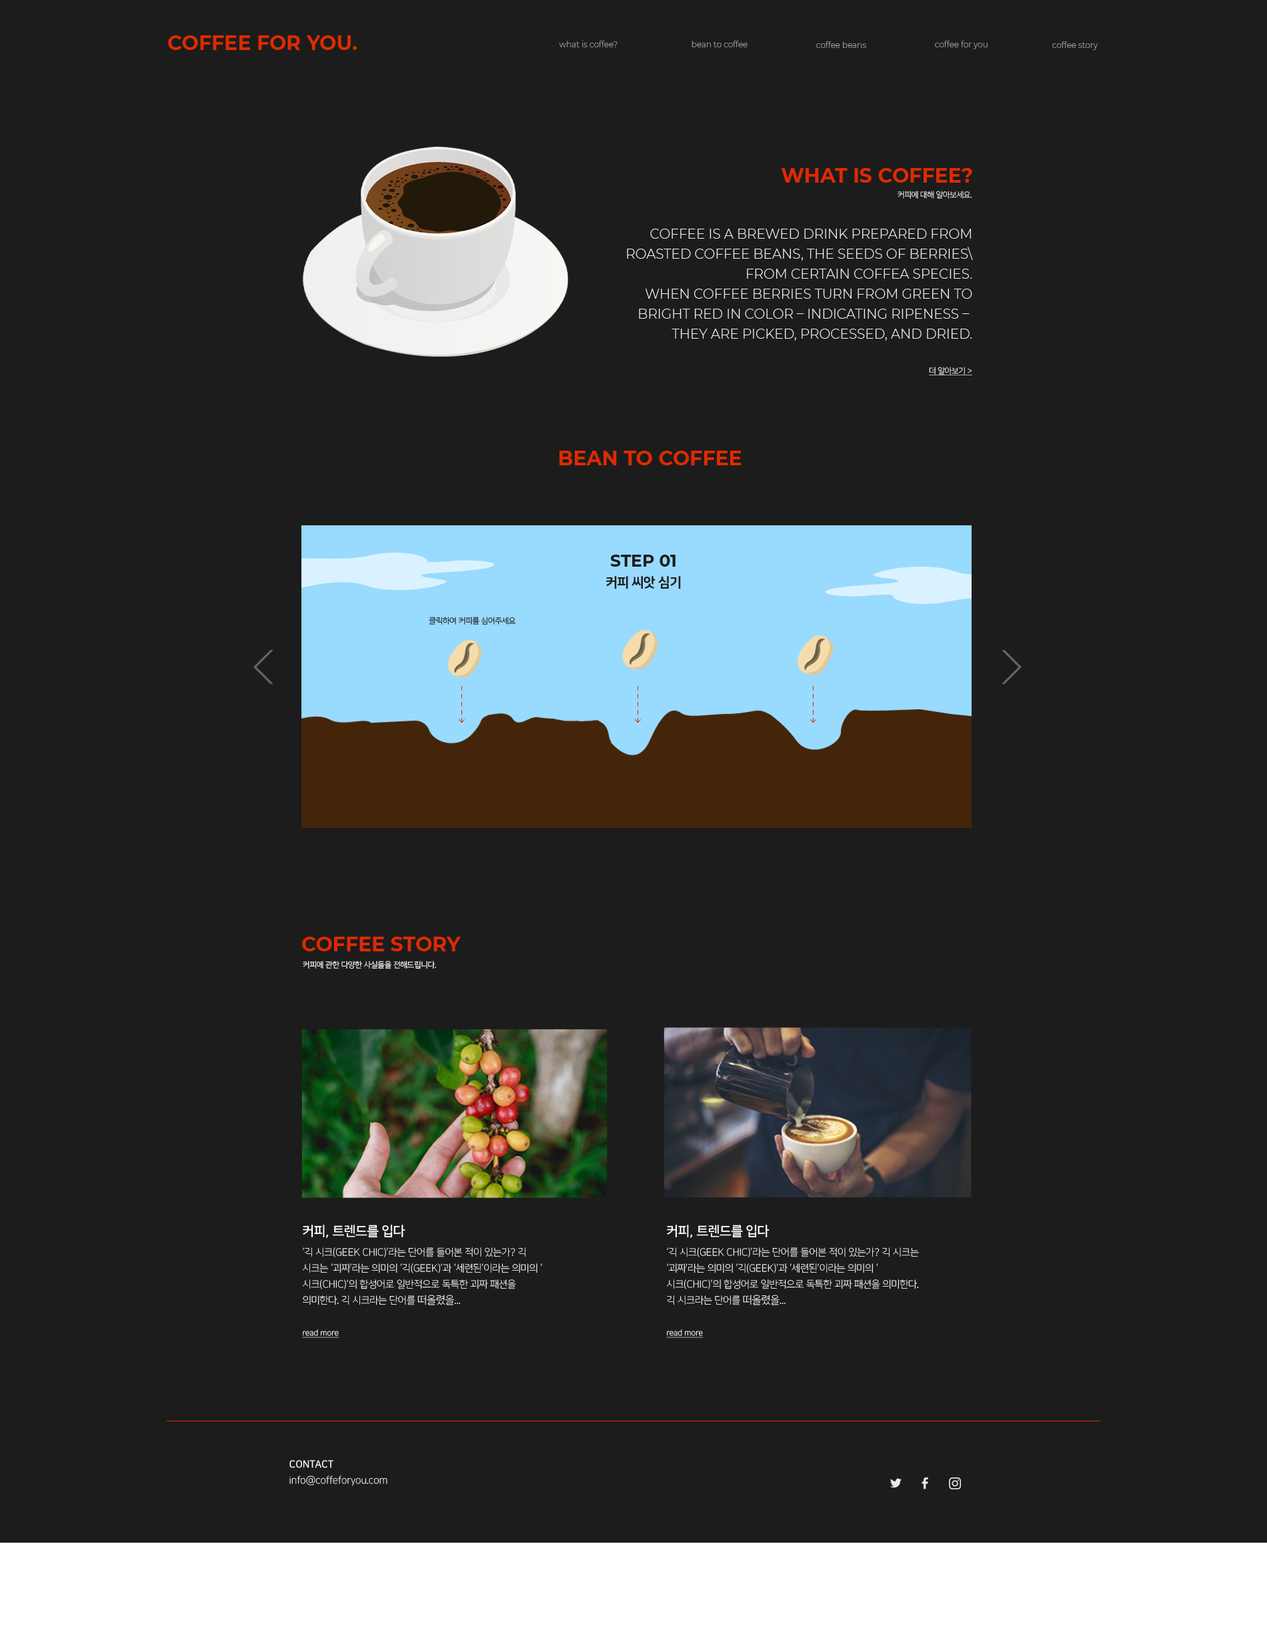
<style>
.page{position:relative;width:1267px;height:1640px;background:#1c1c1c}
.page>*{position:absolute;margin:0}
.t1{font:20px "Montserrat-Bold";color:#de2a00;text-transform:uppercase}
.t2{font:8px "Montserrat-Light";color:#b2b2b2}
.t3{font:8px "NanumSquare_acL";color:#f2f2f2;text-transform:uppercase}
.t4{font:13.3px/20px "Montserrat-Light";color:#f2f2f2;text-transform:uppercase}
.t5{font:8px "NanumSquare_acL";color:#f2f2f2;text-transform:uppercase;text-decoration:underline}
.t6{font:13.3px/20px "NanumSquare_acEB";color:#1c1c1c;text-transform:uppercase}
.t7{font:16.7px/20px "Montserrat-Bold";color:#1c1c1c;text-transform:uppercase}
.t8{font:8px "NanumSquare_acL";color:#1c1c1c;text-transform:uppercase}
.t9{font:8px "NanumSquare_acR";color:#f2f2f2;text-transform:uppercase}
.t10{font:10px/16px "NanumSquare_acL";color:#ffffff;text-transform:uppercase}
.t11{font:13.3px/32px "NanumSquare_acB";color:#ffffff;text-transform:uppercase}
.t12{font:13.3px/40px "NanumSquare_acB";color:#ffffff;text-transform:uppercase}
.t13{font:13.3px/20px "NanumSquare_acB";color:#ffffff;text-transform:uppercase}
.t14{font:10px/20px "NanumSquare_acL";color:#ffffff;text-transform:uppercase}
.t15{font:10.7px/16px "NanumSquare_acL";color:#ffffff;text-transform:uppercase}
.t16{font:8px/16px "NanumSquare_acL";color:#ffffff;text-decoration:underline}
.t17{font:10px/16px "NanumSquare_acL";color:#ffffff}
.t18{font:10px/16px "NanumSquare_acB";color:#ffffff;text-transform:uppercase}
</style>
<div class="page">
<p class="t1" style="left:168px;top:35px;width:189px;height:15px">Coffee for you.</p>
<p class="t2" style="left:559px;top:41px;width:58px;height:6px">what is coffee?</p>
<p class="t2" style="left:691px;top:41px;width:56px;height:6px">bean to coffee</p>
<p class="t2" style="left:816px;top:41px;width:50px;height:7px">coffee beans</p>
<p class="t2" style="left:935px;top:41px;width:52px;height:8px">coffee for you</p>
<p class="t2" style="left:1052px;top:41px;width:46px;height:9px">coffee story</p>
<p class="t1" style="left:781px;top:168px;width:191px;height:15px">what is coffee?</p>
<p class="t3" style="left:897px;top:191px;width:75px;height:8px">커피에 대해 알아보세요.</p>
<p class="t4" style="left:627px;top:229px;width:346px;height:112px;text-align:right">Coffee is a brewed drink prepared from<br>roasted coffee beans, the seeds of berries\<br>from certain Coffea species.<br>When coffee berries turn from green to<br>bright red in color – indicating ripeness – <br>they are picked, processed, and dried.</p>
<p class="t5" style="left:929px;top:367px;width:43px;height:8px">더 알아보기 &gt;</p>
<p class="t1" style="left:559px;top:451px;width:182px;height:14px">bean to coffee</p>
<p class="t6" style="left:606px;top:555px;width:75px;height:34px;text-align:center"><span class="t7">step 01<br></span>커피 씨앗 심기</p>
<p class="t8" style="left:429px;top:617px;width:87px;height:8px">클릭하여 커피를 심어주세요</p>
<p class="t1" style="left:302px;top:937px;width:159px;height:14px">coffee story</p>
<p class="t9" style="left:303px;top:961px;width:133px;height:8px">커피에 관한 다양한 사실들을 전해드립니다.</p>
<p class="t10" style="left:302px;top:1225px;width:240px;height:113px"><span class="t11">커피, 트렌드</span><span class="t12">를</span><span class="t13"> 입다<br></span><span class="t14">‘긱 시크(Geek Chic</span>)’라는 단어를 들어본 적이 있는가? 긱 시크는 ‘괴짜’라는 의미의 ‘긱(Geek)’과 ‘세련된’이라는 의미의 ‘시크(Chic)’의 합성어로 일반적으로 독특한 괴짜 패션을 의미한다. 긱 시크라는 단어를 <span class="t15">떠올렸을...<br><br></span><span class="t16">read more</span></p>
<p class="t10" style="left:666px;top:1225px;width:253px;height:113px"><span class="t11">커피, 트렌드</span><span class="t12">를</span><span class="t13"> 입다<br></span><span class="t14">‘긱 시크(Geek Chic</span>)’라는 단어를 들어본 적이 있는가? 긱 시크는 ‘괴짜’라는 의미의 ‘긱(Geek)’과 ‘세련된’이라는 의미의 ‘시크(Chic)’의 합성어로 일반적으로 독특한 괴짜 패션을 의미한다. 긱 시크라는 단어를 <span class="t15">떠올렸을...<br><br></span><span class="t16">read more</span></p>
<p class="t17" style="left:289px;top:1460px;width:98px;height:26px"><span class="t18">CONTACT<br></span>info@coffeforyou.com</p>
</div>
